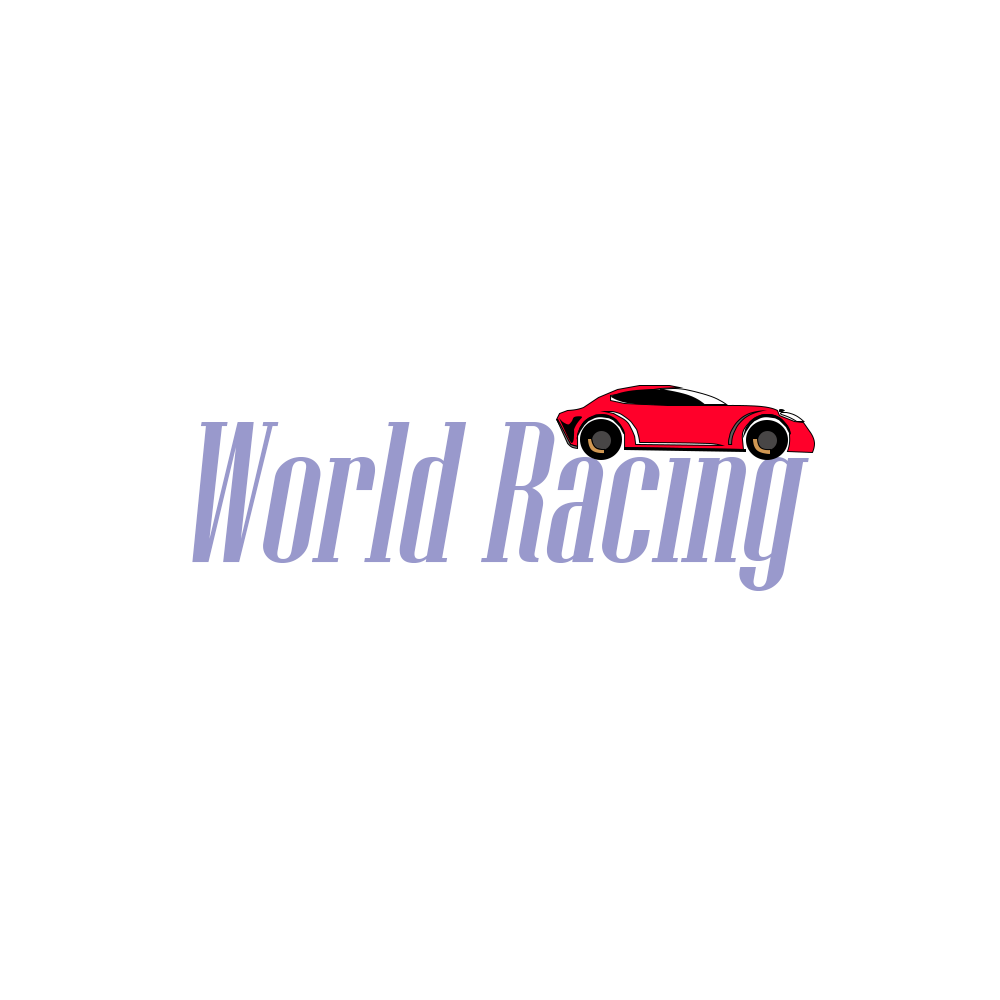
<style>
.page{position:relative;width:1000px;height:1000px;background:#ffffff}
.page>*{position:absolute;margin:0}
.t1{font:200px "NiagaraSolid-Reg";color:#9999cc;font-style:italic}
</style>
<div class="page">
<p class="t1" style="left:192px;top:422px;width:617px;height:169px">World Racing</p>
</div>
